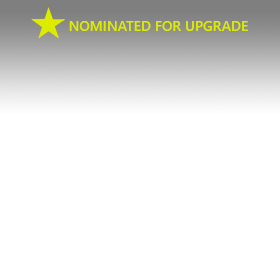
<style>
.page{position:relative;width:280px;height:280px;background:#ffffff}
.page>*{position:absolute;margin:0}
.t1{font:14px "SegoeUI-Semibold";color:#ddeb00}
</style>
<div class="page">
<p class="t1" style="left:69px;top:21px;width:179px;height:10px">NOMINATED FOR UPGRADE</p>
</div>
